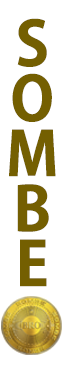
<style>
.page{position:relative;width:64px;height:378px;background:#ffffff}
.page>*{position:absolute;margin:0}
.t1{font:60px/55px "AdobeGothicStd-Bold";color:#745f01;font-weight:bold}
</style>
<div class="page">
<p class="t1" style="left:9px;top:18px;width:47px;height:269px;text-align:center">S<br>O<br>M<br>B<br>E</p>
</div>
